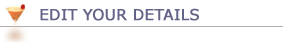
<style>
.page{position:relative;width:283px;height:42px;background:#ffffff}
.page>*{position:absolute;margin:0}
.t1{font:15px "Verdana";color:#636388;font-weight:bold}
</style>
<div class="page">
<p class="t1" style="left:40px;top:8px;width:159px;height:13px">EDIT YOUR DETAILS</p>
</div>
